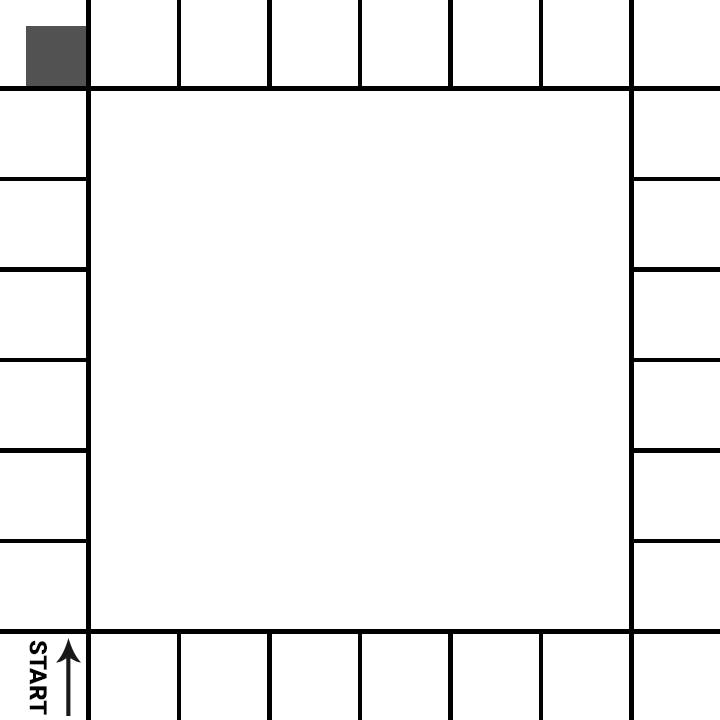
<style>
.page{position:relative;width:720px;height:720px;background:#ffffff}
.page>*{position:absolute;margin:0}
.t1{font:24px "Roboto-Black";color:#000000}
</style>
<div class="page">
<p class="t1" style="left:29px;top:640px;width:18px;height:75px;rotate:90deg">START</p>
</div>
